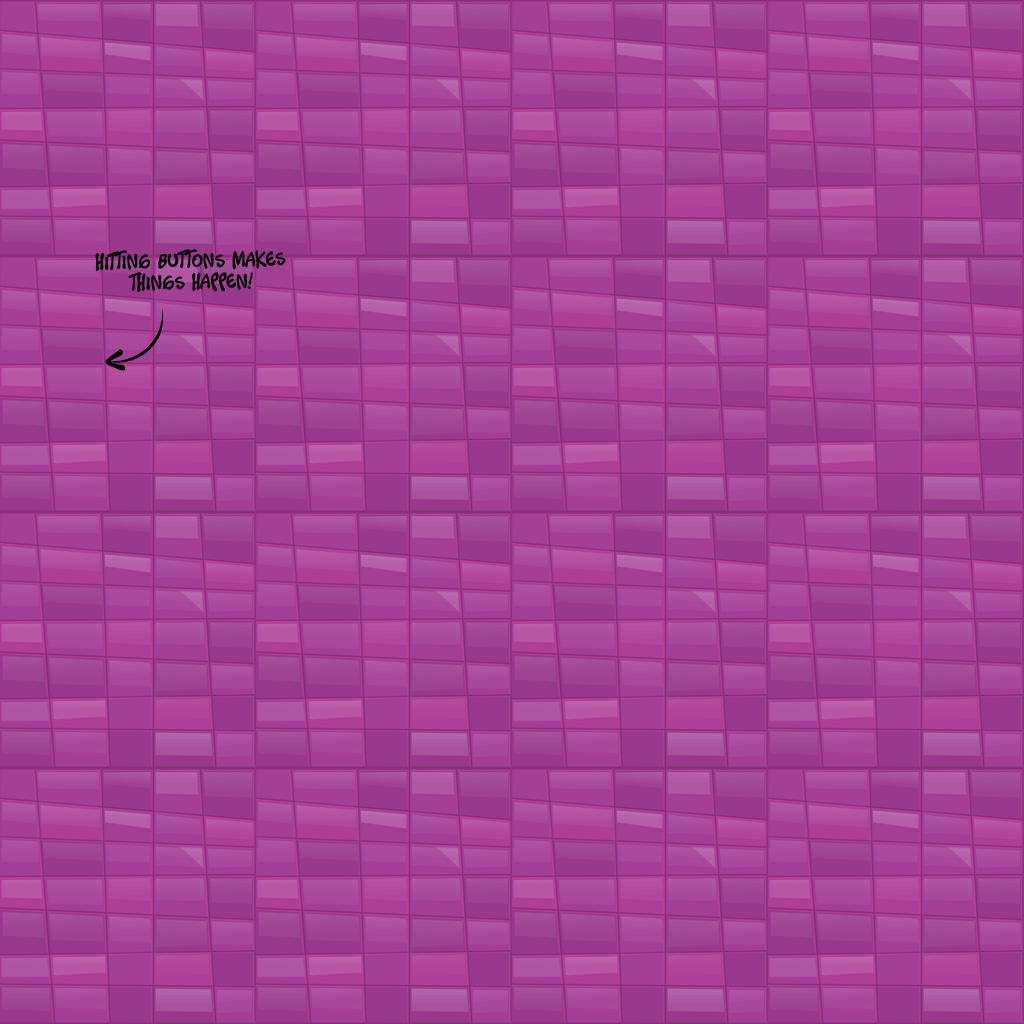
<style>
.page{position:relative;width:1024px;height:1024px}
.page>*{position:absolute;margin:0}
.t1{font:18px "Timotheos";letter-spacing:0.025em;color:#000000}
</style>
<div class="page">
<p class="t1" style="left:95px;top:249px;width:191px;height:43px;text-align:center;rotate:-1deg">hitting buttons makes<br>things happen!</p>
</div>
